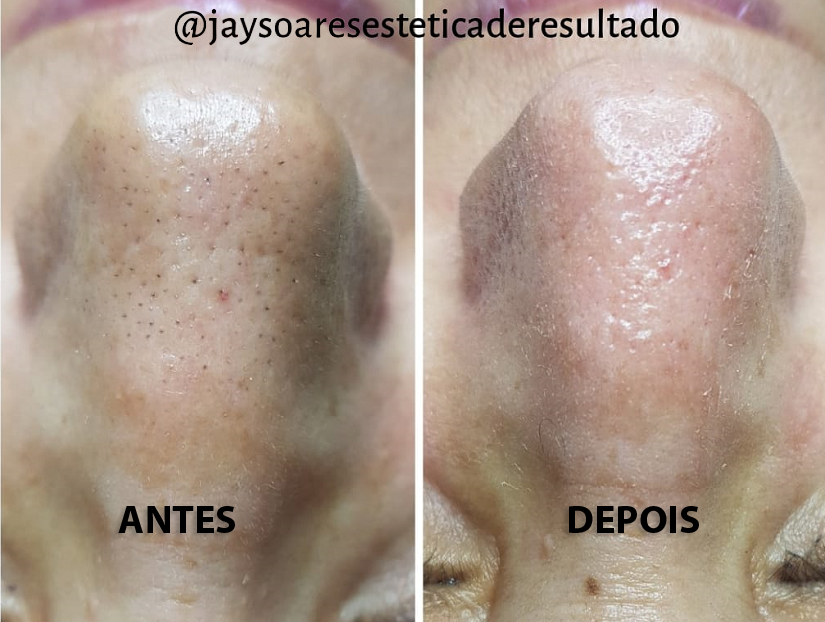
<style>
.page{position:relative;width:825px;height:622px}
.page>*{position:absolute;margin:0}
.t1{font:40px "MyriadPro-Bold";color:#000000}
</style>
<div class="page">
<p class="t1" style="left:118px;top:506px;width:117px;height:27px">ANTES</p>
<p class="t1" style="left:569px;top:506px;width:130px;height:27px">DEPOIS</p>
</div>
